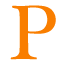
<style>
.page{position:relative;width:64px;height:64px;background:#ffffff}
.page>*{position:absolute;margin:0}
.t1{font:74px "MonticelloLT-Roman";color:#f97e00}
</style>
<div class="page">
<p class="t1" style="left:10px;top:5px;width:46px;height:55px">P</p>
</div>
